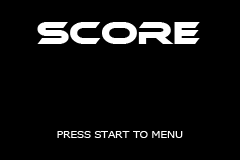
<style>
.page{position:relative;width:240px;height:160px;background:#000000}
.page>*{position:absolute;margin:0}
.t1{font:30px "Ethnocentric";color:#ffffff;text-transform:uppercase;scale:1.07 1}
.t2{font:10px "Meiryo";color:#ffffff;text-transform:uppercase;scale:1.07 1}
</style>
<div class="page">
<p class="t1" style="left:37px;top:22px;width:163px;height:22px">SCORE</p>
<p class="t2" style="left:57px;top:131px;width:126px;height:7px">Press START to menu</p>
</div>
